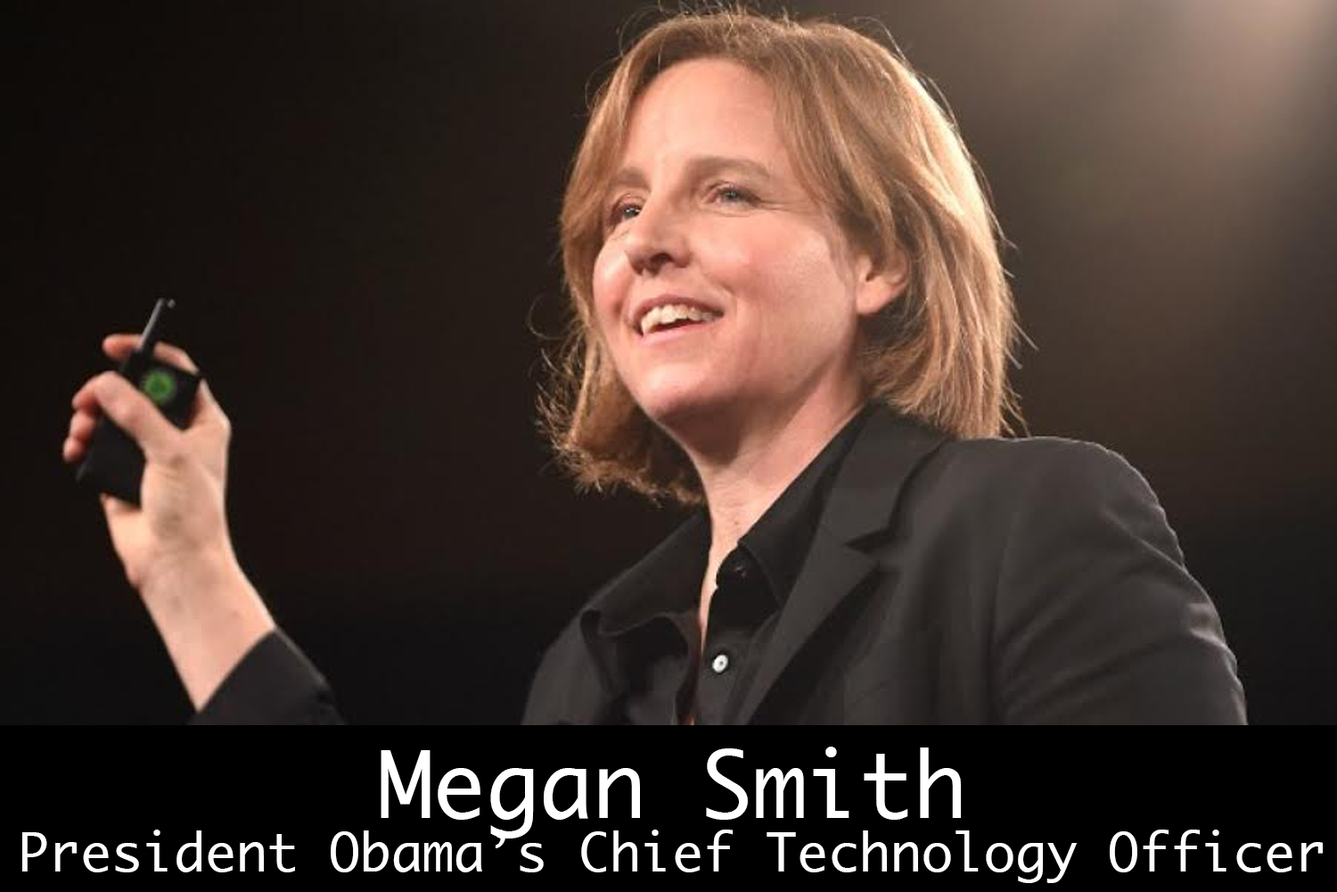
<style>
.page{position:relative;width:1337px;height:892px}
.page>*{position:absolute;margin:0}
.t1{font:89.2px "Ayuthaya";color:#ffffff}
.t2{font:52px "Ayuthaya";color:#ffffff}
</style>
<div class="page">
<p class="t1" style="left:381px;top:746px;width:580px;height:92px">Megan Smith</p>
<p class="t2" style="left:22px;top:829px;width:1301px;height:54px">President Obama’s Chief Technology Officer</p>
</div>
